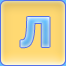
<style>
.page{position:relative;width:66px;height:66px}
.page>*{position:absolute;margin:0}
.t1{font:41px "Tahoma-Bold"}
</style>
<div class="page">
<p class="t1" style="left:20px;top:17px;width:30px;height:31px">Л</p>
<p class="t1" style="left:20px;top:17px;width:30px;height:31px">Л</p>
</div>
